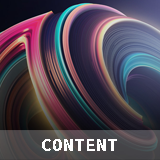
<style>
.page{position:relative;width:160px;height:160px}
.page>*{position:absolute;margin:0}
.t1{font:18px "SourceCodePro-Bold";color:#ffffff}
</style>
<div class="page">
<p class="t1" style="left:42px;top:139px;width:75px;height:12px">CONTENT</p>
</div>
